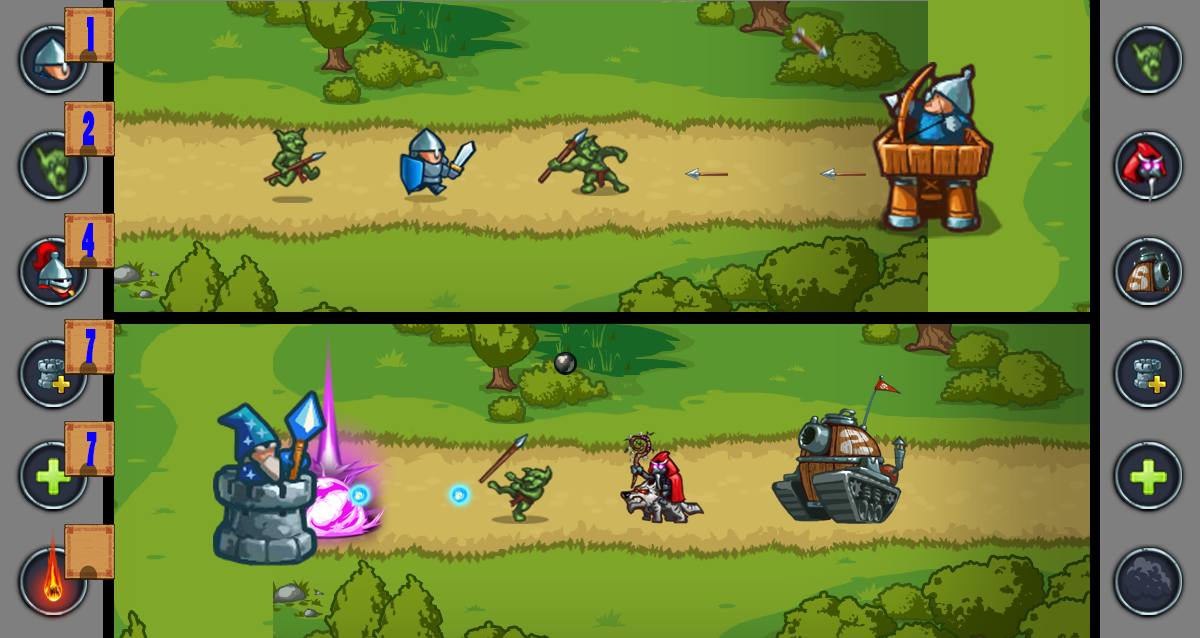
<style>
.page{position:relative;width:1200px;height:638px}
.page>*{position:absolute;margin:0}
.t1{font:46.6px "PoplarStd";color:#0c00ff;scale:0.6 1}
</style>
<div class="page">
<p class="t1" style="left:87px;top:17px;width:7px;height:34px">1</p>
<p class="t1" style="left:83px;top:111px;width:12px;height:34px">2</p>
<p class="t1" style="left:82px;top:223px;width:13px;height:34px">4</p>
<p class="t1" style="left:86px;top:329px;width:10px;height:34px">7</p>
<p class="t1" style="left:87px;top:432px;width:10px;height:34px">7</p>
</div>
